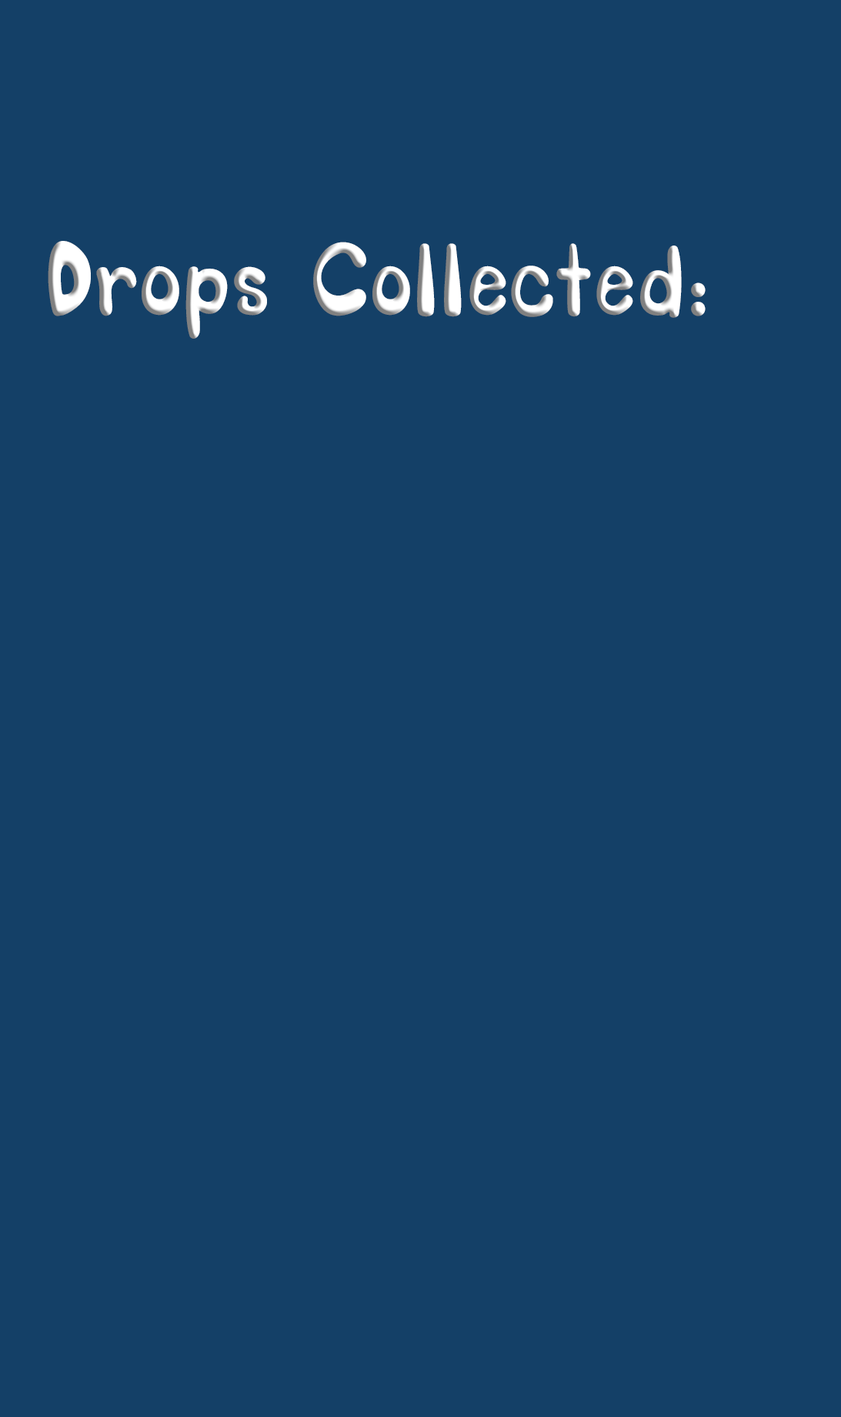
<style>
.page{position:relative;width:841px;height:1417px;background:#144067}
.page>*{position:absolute;margin:0}
.t1{font:77px "SORRY_SORRY";letter-spacing:0.03em}
</style>
<div class="page">
<p class="t1" style="left:48px;top:241px;width:658px;height:98px">Drops Collected:</p>
</div>
